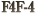
<style>
.page{position:relative;width:51px;height:13px;background:#ffffff}
.page>*{position:absolute;margin:0}
.t1{font:15px "RyuminPro-ExBold";letter-spacing:-0.06em;color:#4a3f32;font-weight:bold;scale:0.9 1}
</style>
<div class="page">
<p class="t1" style="left:1px;top:1px;width:34px;height:12px">F4F-4</p>
</div>
